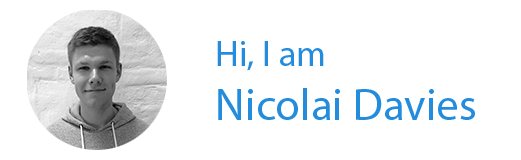
<style>
.page{position:relative;width:521px;height:160px;background:#ffffff}
.page>*{position:absolute;margin:0}
.t1{font:45px "MyriadPro-Regular";color:#238cdd}
.t2{font:36px "MyriadPro-Regular";color:#238cdd}
</style>
<div class="page">
<p class="t1" style="left:217px;top:41px;width:258px;height:79px"><span class="t2">Hi, I am<br></span>Nicolai Davies</p>
</div>
